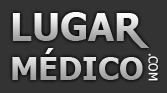
<style>
.page{position:relative;width:167px;height:93px;background:#333333}
.page>*{position:absolute;margin:0}
.t1{font:38px "Tahoma-Bold"}
.t2{font:32px "Tahoma-Bold"}
.t3{font:12px "Tahoma";color:#ffffff}
</style>
<div class="page">
<p class="t1" style="left:12px;top:12px;width:102px;height:29px">LUGA</p>
<p class="t2" style="left:12px;top:48px;width:131px;height:32px"><span class="t1"><br></span>MÉDICO</p>
<p class="t3" style="left:148px;top:53px;width:10px;height:28px;rotate:90deg">.COM</p>
</div>
